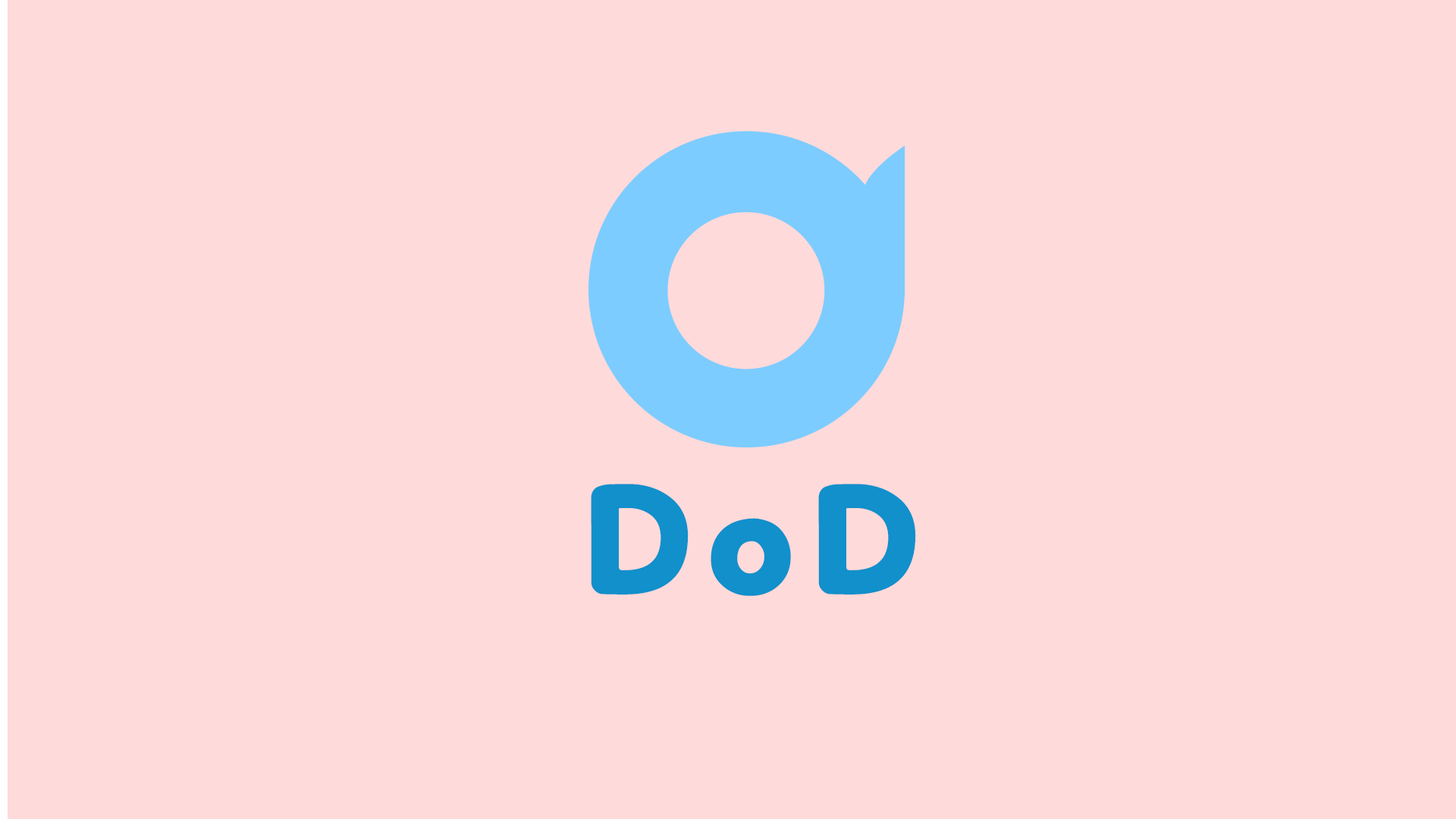
<style>
.page{position:relative;width:1456px;height:819px;background:#ffdada}
.page>*{position:absolute;margin:0}
.t1{font:161.8px "Linotte-Heavy";letter-spacing:0.08em;color:#1190cb}
</style>
<div class="page">
<p class="t1" style="left:591px;top:484px;width:325px;height:112px">DoD</p>
</div>
